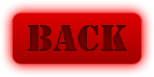
<style>
.page{position:relative;width:154px;height:77px}
.page>*{position:absolute;margin:0}
.t1{font:34.6px "StencilStd";color:#610000}
</style>
<div class="page">
<p class="t1" style="left:28px;top:25px;width:99px;height:26px">Back</p>
</div>
